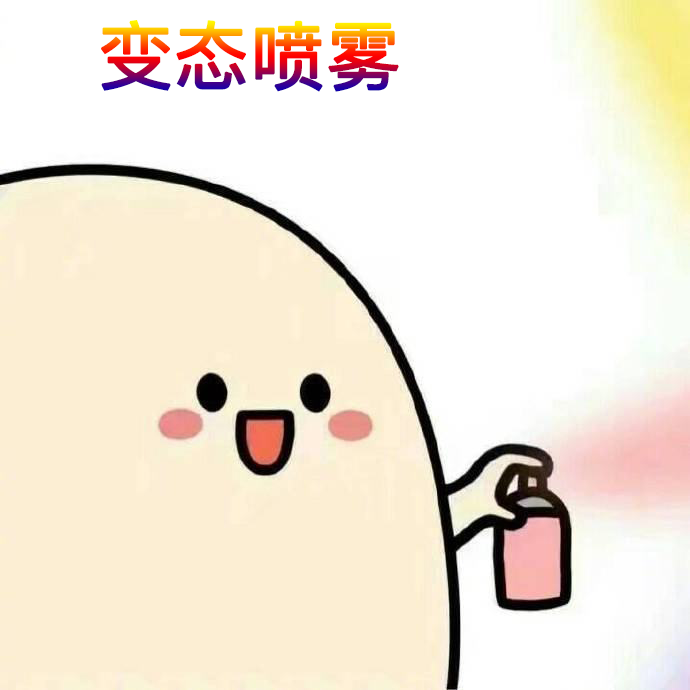
<style>
.page{position:relative;width:690px;height:690px;background:#ffffff}
.page>*{position:absolute;margin:0}
.t1{font:74px "PingFangSC-Regular";font-weight:bold}
</style>
<div class="page">
<p class="t1" style="left:101px;top:20px;width:298px;height:72px">变态喷雾</p>
</div>
